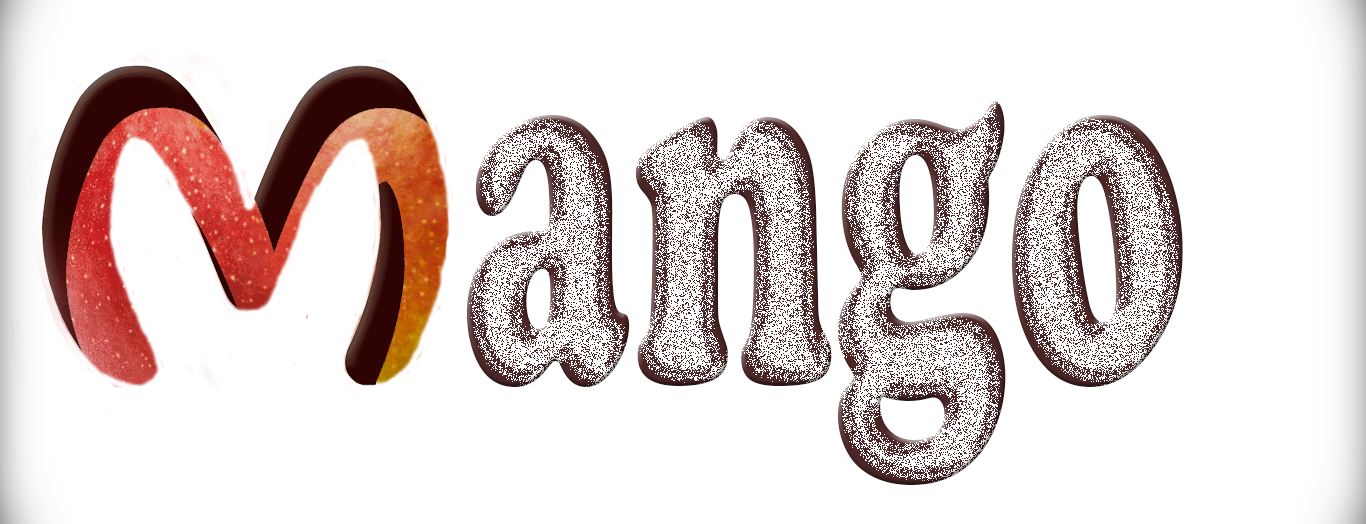
<style>
.page{position:relative;width:1366px;height:524px;background:#ffffff}
.page>*{position:absolute;margin:0}
.t1{font:543.6px "CooperBlack";scale:0.55 1}
</style>
<div class="page">
<p class="t1" style="left:466px;top:100px;width:717px;height:385px">ango</p>
</div>
